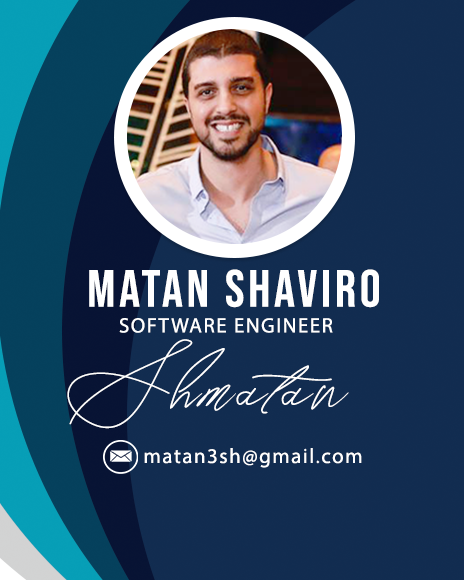
<style>
.page{position:relative;width:464px;height:580px}
.page>*{position:absolute;margin:0}
.t1{font:52px "BebasNeue-Regular";letter-spacing:0.075em;color:#ffffff}
.t2{font:20.8px "MyriadPro-Regular";letter-spacing:0.075em;color:#ffffff}
.t3{font:72px "Seoulscript";letter-spacing:0.075em;color:#ffffff}
</style>
<div class="page">
<p class="t1" style="left:89px;top:269px;width:290px;height:39px">Matan Shaviro</p>
<p class="t2" style="left:119px;top:318px;width:214px;height:15px">SOFTWARE ENGINEER</p>
<p class="t3" style="left:67px;top:339px;width:282px;height:90px">Shmatan</p>
<p class="t2" style="left:144px;top:448px;width:218px;height:20px">matan3sh@gmail.com</p>
</div>
